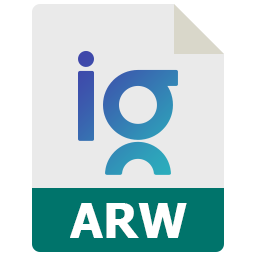
<style>
.page{position:relative;width:256px;height:256px;background:#eaeaea}
.page>*{position:absolute;margin:0}
.t1{font:48px "Tahoma-Bold";color:#ffffff}
</style>
<div class="page">
<p class="t1" style="left:70px;top:203px;width:117px;height:35px">ARW</p>
</div>
